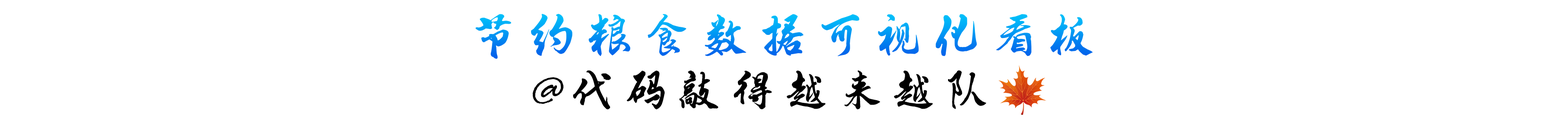
<style>
.page{position:relative;width:1568px;height:118px;background:#ffffff}
.page>*{position:absolute;margin:0}
.t1{font:48.2px "-";letter-spacing:0.2em}
.t2{font:44.7px "-";letter-spacing:0.2em;color:#000000}
</style>
<div class="page">
<p class="t1" style="left:476px;top:14px;width:617px;height:45px">节约粮食数据可视化看板</p>
<p class="t2" style="left:532px;top:70px;width:454px;height:40px">@代码敲得越来越队</p>
</div>
